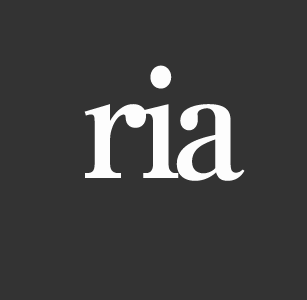
<style>
.page{position:relative;width:307px;height:300px;background:#333333}
.page>*{position:absolute;margin:0}
.t1{font:150px "RyuminPro-ExBold";letter-spacing:-0.08em;color:#fdfdfd;scale:0.9 1}
</style>
<div class="page">
<p class="t1" style="left:84px;top:65px;width:161px;height:116px">ria</p>
</div>
